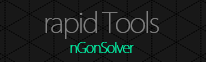
<style>
.page{position:relative;width:206px;height:62px;background:#181818}
.page>*{position:absolute;margin:0}
.t1{font:28px "KozGoPr6N-ExtraLight";letter-spacing:-0.06em;color:#7f7f7f}
.t2{font:14px "KozGoPr6N-ExtraLight";letter-spacing:-0.06em;color:#02f0a4}
</style>
<div class="page">
<p class="t1" style="left:45px;top:11px;width:114px;height:28px">rapid Tools</p>
<p class="t2" style="left:70px;top:42px;width:64px;height:11px">nGonSolver</p>
</div>
